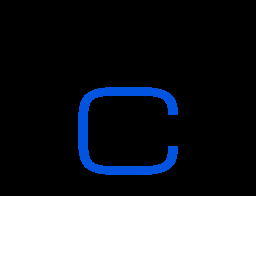
<style>
.page{position:relative;width:256px;height:256px;background:#000000}
.page>*{position:absolute;margin:0}
.t1{font:112px "Michroma";color:#0054df}
</style>
<div class="page">
<p class="t1" style="left:78px;top:87px;width:100px;height:88px">C</p>
</div>
